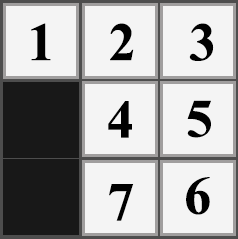
<style>
.page{position:relative;width:238px;height:239px;background:#f4f4f4}
.page>*{position:absolute;margin:0}
.t1{font:54.1px "TimesNewRomanPS-BoldMT";color:#000000}
</style>
<div class="page">
<p class="t1" style="left:31px;top:23px;width:20px;height:38px">1</p>
<p class="t1" style="left:110px;top:23px;width:24px;height:38px">2</p>
<p class="t1" style="left:189px;top:23px;width:25px;height:38px">3</p>
<p class="t1" style="left:108px;top:101px;width:24px;height:37px">4</p>
<p class="t1" style="left:187px;top:100px;width:24px;height:38px">5</p>
<p class="t1" style="left:109px;top:184px;width:25px;height:37px">7</p>
<p class="t1" style="left:186px;top:177px;width:24px;height:38px">6</p>
</div>
